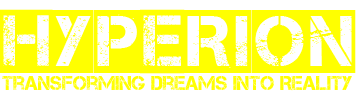
<style>
.page{position:relative;width:356px;height:100px;background:#ffffff}
.page>*{position:absolute;margin:0}
.t1{font:72px "Captureit2";color:#ffff00}
.t2{font:20px "Captureit";color:#ffff00}
</style>
<div class="page">
<p class="t1" style="left:0px;top:9px;width:356px;height:65px">Hyperion</p>
<p class="t2" style="left:2px;top:75px;width:350px;height:16px">Transforming Dreams INTO REALITY</p>
</div>
